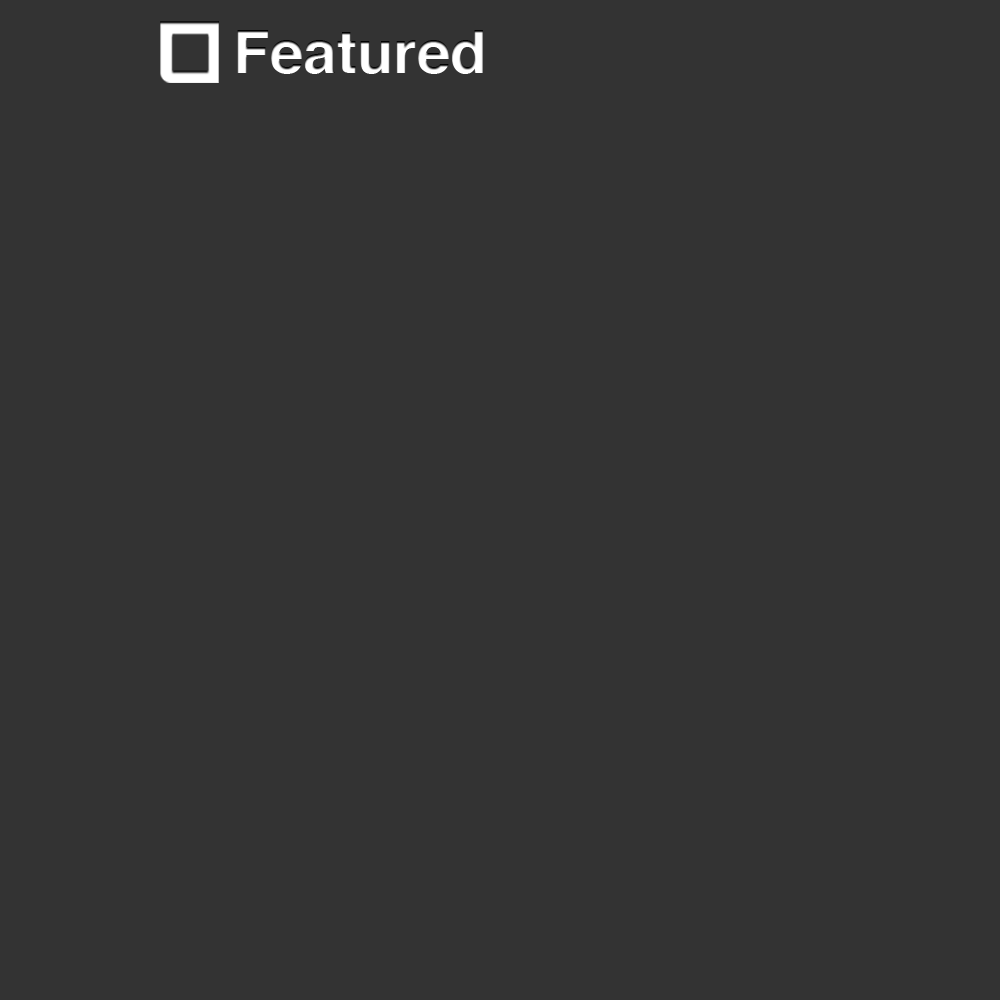
<style>
.page{position:relative;width:1000px;height:1000px;background:#333333}
.page>*{position:absolute;margin:0}
.t1{font:60px "Helvetica-Bold";color:#ffffff}
</style>
<div class="page">
<p class="t1" style="left:237px;top:30px;width:246px;height:44px">Featured</p>
</div>
